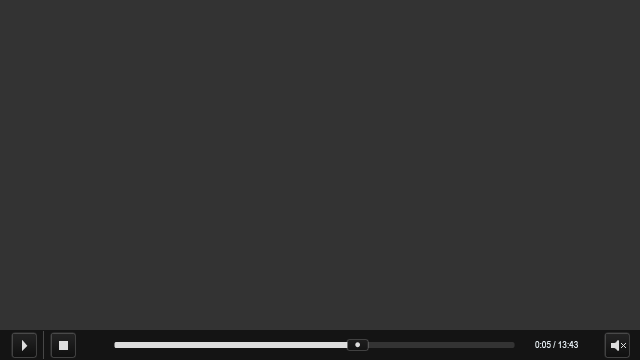
<style>
.page{position:relative;width:640px;height:360px;background:#333333}
.page>*{position:absolute;margin:0}
.t1{font:10px "ArialNarrow";color:#e0e8ed}
</style>
<div class="page">
<p class="t1" style="left:535px;top:341px;width:43px;height:7px">0:05 / 13:43</p>
</div>
